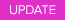
<style>
.page{position:relative;width:65px;height:20px;background:#de2fc6}
.page>*{position:absolute;margin:0}
.t1{font:13px "ProximaNova-Light";color:#ffffff}
</style>
<div class="page">
<p class="t1" style="left:10px;top:5px;width:46px;height:10px">UPDATE</p>
</div>
